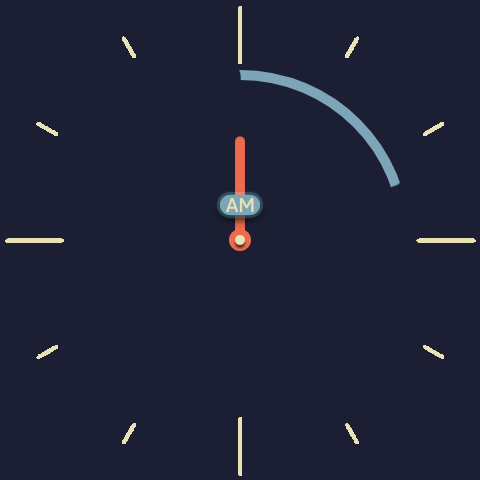
<style>
.page{position:relative;width:480px;height:480px;background:#1c1f33}
.page>*{position:absolute;margin:0}
.t1{font:20px "Asap-Symbol";color:#e9e3b4}
</style>
<div class="page">
<p class="t1" style="left:226px;top:197px;width:28px;height:16px">AM</p>
</div>
